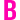
<style>
.page{position:relative;width:20px;height:20px;background:#ffffff}
.page>*{position:absolute;margin:0}
.t1{font:27.6px "BebasNeue-Regular";color:#ff00ae;scale:1.25 1}
</style>
<div class="page">
<p class="t1" style="left:4px;top:0px;width:12px;height:20px">b</p>
</div>
